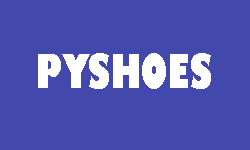
<style>
.page{position:relative;width:250px;height:150px;background:#4348ac}
.page>*{position:absolute;margin:0}
.t1{font:45.7px "GillSans-UltraBoldCondensed";color:#ffffff}
</style>
<div class="page">
<p class="t1" style="left:38px;top:53px;width:173px;height:36px">PYSHOES</p>
</div>
